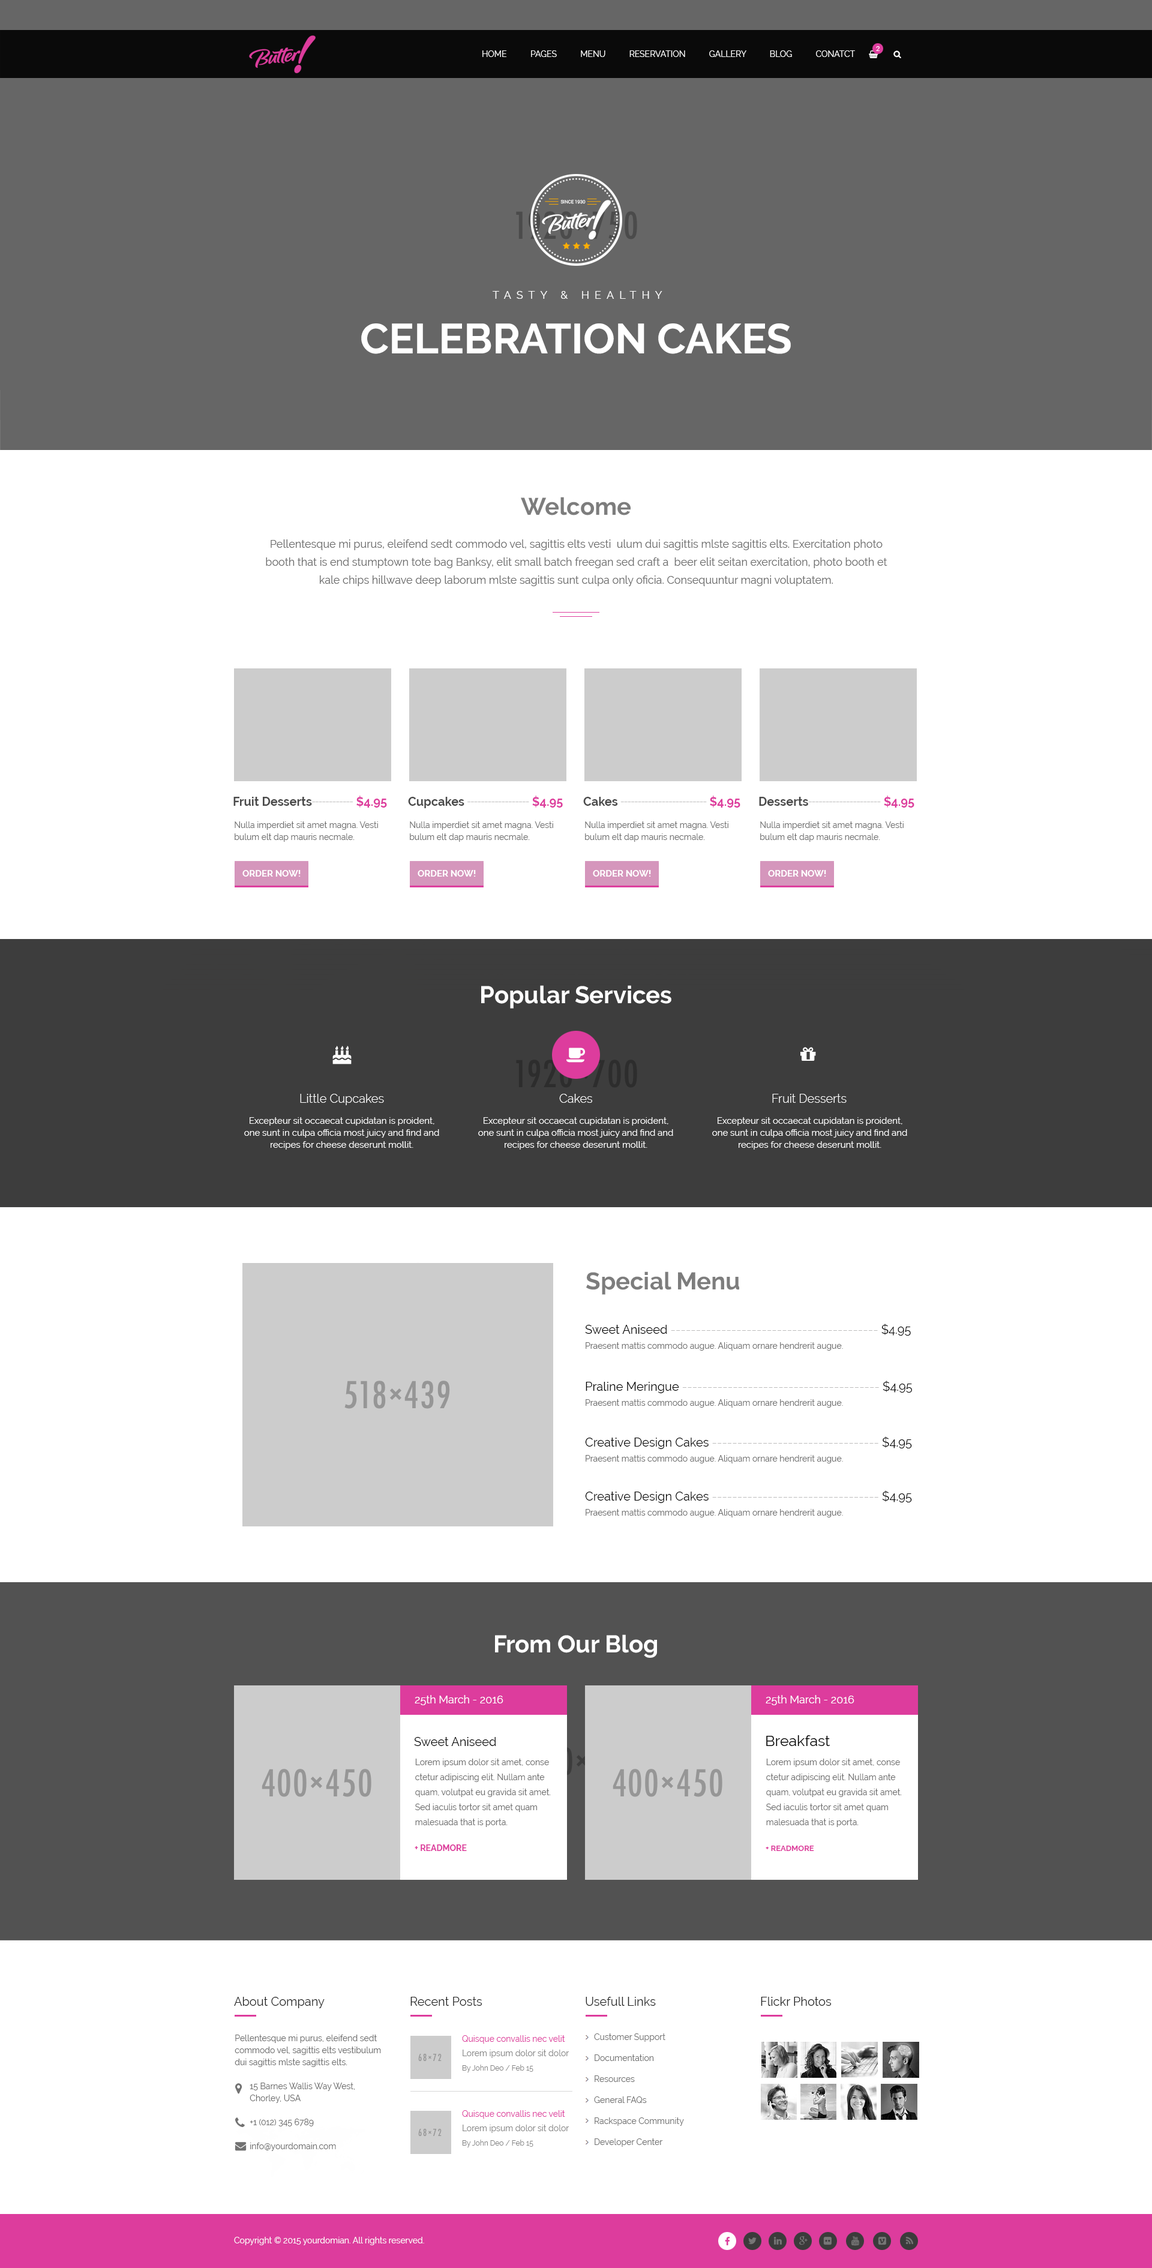
<style>
.page{position:relative;width:1152px;height:2268px;background:#ffffff}
.page>*{position:absolute;margin:0}
.t1{font:6.6px "Lato-Regular";color:#ffffff;text-transform:uppercase}
.t2{font:4.7px "Roboto-Light";color:#ffffff;text-transform:uppercase}
.t3{font:10.8px "Raleway-Regular";letter-spacing:0.5em;color:#ffffff;text-transform:uppercase}
.t4{font:42px "Raleway-Bold";color:#ffffff;text-transform:uppercase}
.t5{font:24px "Raleway-Bold";color:#7d7d7d}
.t6{font:10.8px/18px "Raleway-Regular";color:#6d6d6d}
.t7{font:12px "Raleway-Bold";color:#494949}
.t8{font:12px "Roboto-Light";color:#bdbcbc}
.t9{font:12px "Raleway-Bold";color:#dd3c9d}
.t10{font:8.4px/12px "Raleway-Regular";color:#6d6d6d}
.t11{font:9px "Raleway-Bold";color:#ffffff;text-transform:uppercase}
.t12{font:24px "Raleway-Bold";color:#ffffff}
.t13{font:12px "Raleway-Light";color:#ffffff}
.t14{font:9px/12px "Raleway-Regular";color:#ffffff}
.t15{font:8.4px/15px "Raleway-Regular";color:#6d6d6d}
.t16{font:12px/15px "Raleway-Regular";color:#010101}
.t17{font:12px/15px "Raleway-Regular";color:#bdbcbc}
.t18{font:10.8px "Raleway-Regular";color:#ffffff}
.t19{font:12px "Raleway-Regular";color:#010101}
.t20{font:15px "Raleway-Regular";color:#010101}
.t21{font:8.4px "Raleway-Bold";color:#dd3c9d;text-transform:uppercase}
.t22{font:7.8px "Raleway-Bold";color:#dd3c9d;text-transform:uppercase}
.t23{font:12px "Raleway-Regular";color:#222222}
.t24{font:8.4px/21px "Raleway-Regular";color:#727272}
.t25{font:8.4px/14.4px "Raleway-Regular";color:#dd3c9d}
.t26{font:8.4px/14.4px "Raleway-Regular";color:#878787}
.t27{font:7.2px/14.4px "Raleway-Regular";color:#878787}
.t28{font:8.4px "Raleway-Regular";color:#ffffff}
</style>
<div class="page">
<p class="t1" style="left:876px;top:46px;width:4px;height:5px">2</p>
<p class="t2" style="left:560px;top:200px;width:26px;height:4px">Since 1930</p>
<p class="t3" style="left:493px;top:291px;width:169px;height:8px">Tasty &amp; healthy</p>
<p class="t4" style="left:361px;top:323px;width:430px;height:31px">Celebration Cakes</p>
<p class="t5" style="left:521px;top:497px;width:110px;height:18px">Welcome</p>
<p class="t6" style="left:266px;top:539px;width:621px;height:47px;text-align:center">Pellentesque mi purus, eleifend sedt commodo vel, sagittis elts vesti  ulum dui sagittis mlste sagittis elts. Exercitation photo booth that is end stumptown tote bag Banksy, elit small batch freegan sed craft a  beer elit seitan exercitation, photo booth et kale chips hillwave deep laborum mlste sagittis sunt culpa only oficia. Consequuntur magni voluptatem.</p>
<p class="t7" style="left:233px;top:796px;width:154px;height:12px">Fruit Desserts<span class="t8">------------ </span><span class="t9">$4.95</span></p>
<p class="t8" style="left:408px;top:796px;width:155px;height:12px"><span class="t7">Cupcakes </span>------------------ <span class="t9">$4.95</span></p>
<p class="t8" style="left:583px;top:796px;width:157px;height:12px"><span class="t7">Cakes </span>------------------------- <span class="t9">$4.95</span></p>
<p class="t8" style="left:759px;top:796px;width:155px;height:12px"><span class="t7">Desserts</span>--------------------- <span class="t9">$4.95</span></p>
<p class="t10" style="left:235px;top:821px;width:143px;height:21px">Nulla imperdiet sit amet magna. Vesti bulum elt dap mauris necmale.</p>
<p class="t10" style="left:410px;top:821px;width:143px;height:21px">Nulla imperdiet sit amet magna. Vesti bulum elt dap mauris necmale.</p>
<p class="t10" style="left:585px;top:821px;width:143px;height:21px">Nulla imperdiet sit amet magna. Vesti bulum elt dap mauris necmale.</p>
<p class="t10" style="left:760px;top:821px;width:144px;height:21px">Nulla imperdiet sit amet magna. Vesti bulum elt dap mauris necmale.</p>
<p class="t11" style="left:242px;top:870px;width:59px;height:7px">Order now!</p>
<p class="t11" style="left:418px;top:870px;width:58px;height:7px">Order now!</p>
<p class="t11" style="left:593px;top:870px;width:58px;height:7px">Order now!</p>
<p class="t11" style="left:768px;top:870px;width:58px;height:7px">Order now!</p>
<p class="t12" style="left:481px;top:985px;width:190px;height:24px">Popular Services</p>
<p class="t13" style="left:300px;top:1094px;width:84px;height:11px">Little Cupcakes</p>
<p class="t13" style="left:559px;top:1094px;width:33px;height:9px">Cakes</p>
<p class="t13" style="left:772px;top:1094px;width:75px;height:9px">Fruit Desserts</p>
<p class="t14" style="left:244px;top:1117px;width:195px;height:33px;text-align:center">Excepteur sit occaecat cupidatan is proident, one sunt in culpa officia most juicy and find and recipes for cheese deserunt mollit.</p>
<p class="t14" style="left:478px;top:1117px;width:195px;height:33px;text-align:center">Excepteur sit occaecat cupidatan is proident, one sunt in culpa officia most juicy and find and recipes for cheese deserunt mollit.</p>
<p class="t14" style="left:712px;top:1117px;width:195px;height:33px;text-align:center">Excepteur sit occaecat cupidatan is proident, one sunt in culpa officia most juicy and find and recipes for cheese deserunt mollit.</p>
<p class="t5" style="left:586px;top:1271px;width:153px;height:24px">Special Menu</p>
<p class="t15" style="left:585px;top:1324px;width:326px;height:27px"><span class="t16">Sweet Aniseed </span><span class="t17">-----------------------------------------</span><span class="t16"> $4.95<br></span>Praesent mattis commodo augue. Aliquam ornare hendrerit augue.</p>
<p class="t15" style="left:586px;top:1381px;width:326px;height:27px"><span class="t16">Praline Meringue </span><span class="t17">---------------------------------------</span><span class="t16"> $4.95<br></span>Praesent mattis commodo augue. Aliquam ornare hendrerit augue.</p>
<p class="t15" style="left:585px;top:1436px;width:327px;height:27px"><span class="t16">Creative Design Cakes </span><span class="t17">---------------------------------</span><span class="t16"> $4.95<br></span>Praesent mattis commodo augue. Aliquam ornare hendrerit augue.</p>
<p class="t15" style="left:585px;top:1490px;width:327px;height:27px"><span class="t16">Creative Design Cakes </span><span class="t17">---------------------------------</span><span class="t16"> $4.95<br></span>Praesent mattis commodo augue. Aliquam ornare hendrerit augue.</p>
<p class="t12" style="left:495px;top:1634px;width:162px;height:24px">From Our Blog</p>
<p class="t18" style="left:415px;top:1695px;width:88px;height:10px">25th March - 2016</p>
<p class="t18" style="left:766px;top:1695px;width:88px;height:10px">25th March - 2016</p>
<p class="t19" style="left:414px;top:1737px;width:82px;height:9px">Sweet Aniseed</p>
<p class="t20" style="left:766px;top:1735px;width:64px;height:11px">Breakfast</p>
<p class="t15" style="left:415px;top:1759px;width:136px;height:68px">Lorem ipsum dolor sit amet, conse ctetur adipiscing elit. Nullam ante quam, volutpat eu gravida sit amet. Sed iaculis tortor sit amet quam malesuada that is porta.</p>
<p class="t15" style="left:766px;top:1759px;width:136px;height:68px">Lorem ipsum dolor sit amet, conse ctetur adipiscing elit. Nullam ante quam, volutpat eu gravida sit amet. Sed iaculis tortor sit amet quam malesuada that is porta.</p>
<p class="t21" style="left:415px;top:1844px;width:52px;height:7px">+ Readmore</p>
<p class="t22" style="left:766px;top:1846px;width:48px;height:5px">+ Readmore</p>
<p class="t23" style="left:234px;top:1997px;width:91px;height:11px">About Company</p>
<p class="t23" style="left:410px;top:1997px;width:72px;height:9px">Recent Posts</p>
<p class="t23" style="left:586px;top:1997px;width:70px;height:9px">Usefull Links</p>
<p class="t23" style="left:761px;top:1997px;width:71px;height:9px">Flickr Photos</p>
<p class="t24" style="left:594px;top:2033px;width:90px;height:114px">Customer Support<br>Documentation<br>Resources<br>General FAQs<br>Rackspace Community<br>Developer Center</p>
<p class="t10" style="left:235px;top:2035px;width:146px;height:116px">Pellentesque mi purus, eleifend sedt commodo vel, sagittis elts vestibulum dui sagittis mlste sagittis elts.<br><br>       15 Barnes Wallis Way West,<br>       Chorley, USA<br><br>       +1 (012) 345 6789<br><br>       info@yourdomain.com</p>
<p class="t25" style="left:462px;top:2035px;width:107px;height:37px">Quisque convallis nec velit<br><span class="t26">Lorem ipsum dolor sit dolor<br></span><span class="t27">By John Deo / Feb 15</span></p>
<p class="t25" style="left:462px;top:2110px;width:107px;height:37px">Quisque convallis nec velit<br><span class="t26">Lorem ipsum dolor sit dolor<br></span><span class="t27">By John Deo / Feb 15</span></p>
<p class="t28" style="left:234px;top:2237px;width:190px;height:8px">Copyright © 2015 yourdomian. All rights reserved.</p>
</div>
